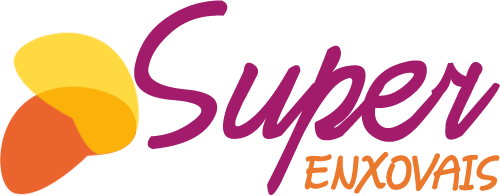
<style>
.page{position:relative;width:500px;height:196px;background:#ffffff}
.page>*{position:absolute;margin:0}
.t1{font:280px "DaisyScript";color:#a31c6b}
.t2{font:63.5px "DaisyScript";color:#eb792d;text-transform:uppercase;font-weight:bold}
</style>
<div class="page">
<p class="t1" style="left:134px;top:0px;width:366px;height:195px">Super</p>
<p class="t2" style="left:304px;top:151px;width:196px;height:43px">enxovais</p>
</div>
